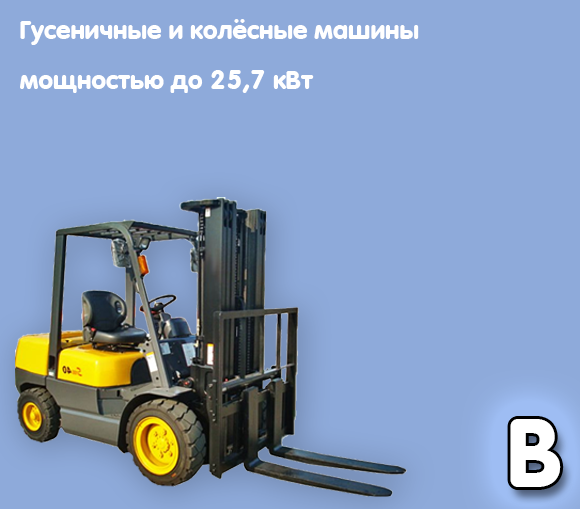
<style>
.page{position:relative;width:580px;height:509px;background:#8eaada}
.page>*{position:absolute;margin:0}
.t1{font:26px/50px "VAGWorld-Bold";color:#ffffff}
.t2{font:93.3px "VAGWorld-Bold";color:#ffffff}
</style>
<div class="page">
<p class="t1" style="left:20px;top:19px;width:399px;height:74px">Гусеничные и колёсные машины<br>мощностью до 25,7 кВт</p>
<p class="t2" style="left:510px;top:419px;width:51px;height:68px">B</p>
</div>
